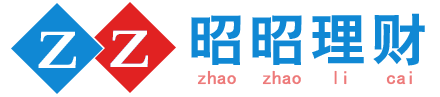
<style>
.page{position:relative;width:440px;height:97px;background:#ffffff}
.page>*{position:absolute;margin:0}
.t1{font:56.2px "HYb2gj";letter-spacing:0.09em;color:#1088d4}
.t2{font:58.2px "2.0-";color:#ffffff}
.t3{font:18.7px "SimHei";color:#ed7a7a;font-weight:bold}
</style>
<div class="page">
<p class="t1" style="left:191px;top:13px;width:234px;height:53px">昭昭理财</p>
<p class="t2" style="left:110px;top:30px;width:38px;height:37px">Z</p>
<p class="t3" style="left:197px;top:70px;width:39px;height:15px">zhao</p>
<p class="t3" style="left:262px;top:70px;width:39px;height:15px">zhao</p>
<p class="t3" style="left:334px;top:70px;width:13px;height:15px">li</p>
<p class="t3" style="left:386px;top:71px;width:26px;height:14px">cai</p>
</div>
